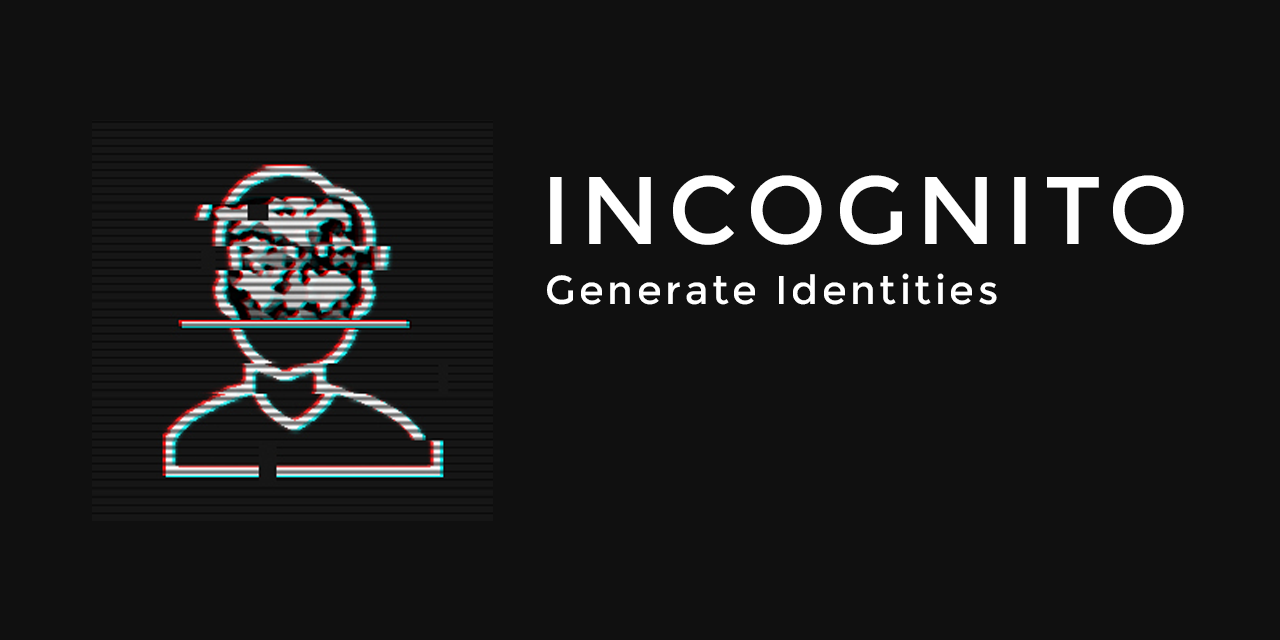
<style>
.page{position:relative;width:1280px;height:640px;background:#101010}
.page>*{position:absolute;margin:0}
.t1{font:95.8px "Montserrat-Regular";letter-spacing:0.09em;color:#ffffff}
.t2{font:40.1px "Montserrat-Regular";letter-spacing:0.09em;color:#ffffff}
</style>
<div class="page">
<p class="t1" style="left:550px;top:175px;width:634px;height:70px">INCOGNITO</p>
<p class="t2" style="left:547px;top:273px;width:450px;height:32px">Generate Identities</p>
</div>
